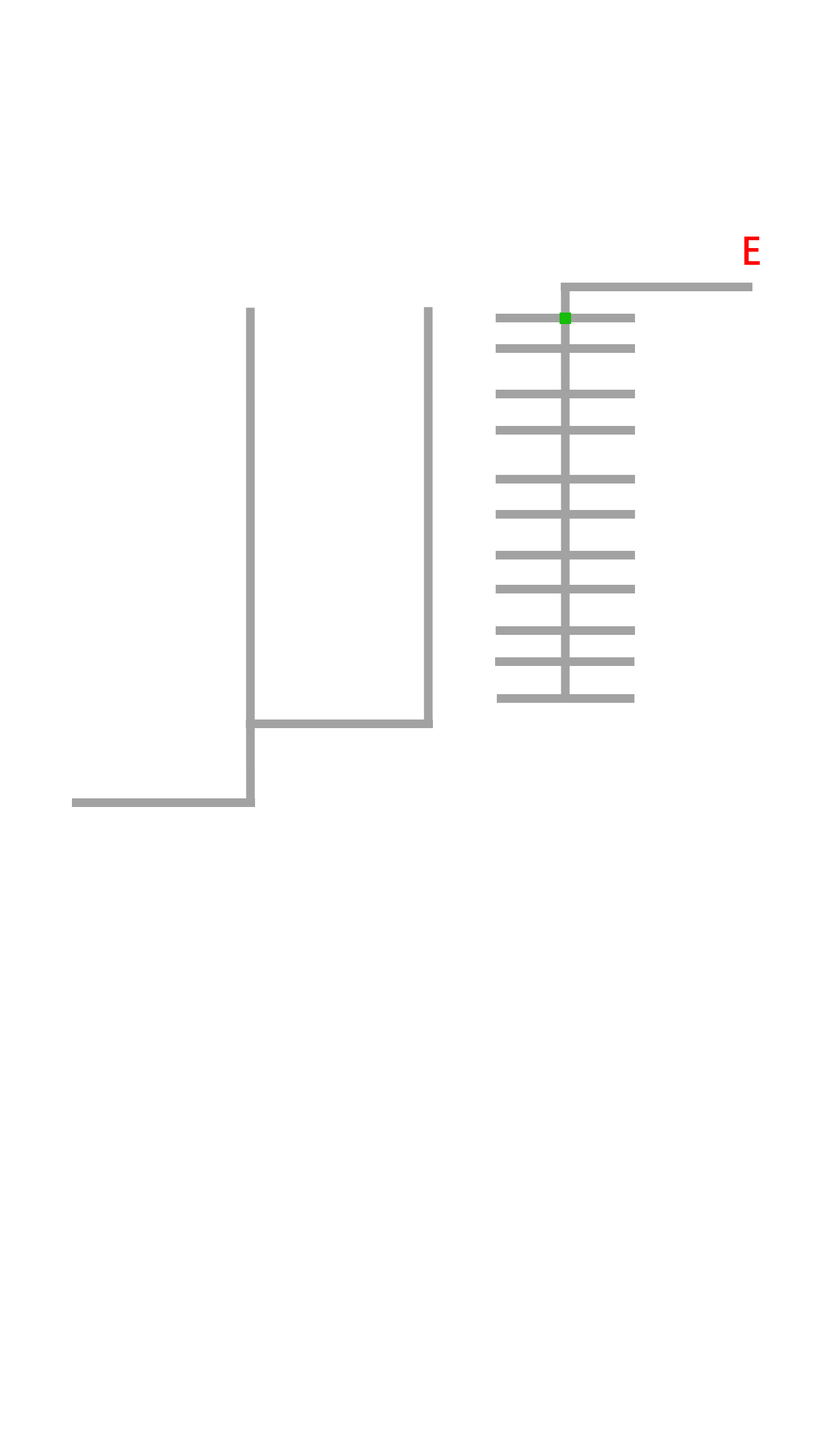
<style>
.page{position:relative;width:829px;height:1439px;background:#ffffff}
.page>*{position:absolute;margin:0}
.t1{font:36.8px "AdobeHeitiStd-Regular";color:#ff0000}
</style>
<div class="page">
<p class="t1" style="left:744px;top:237px;width:16px;height:28px">E</p>
</div>
